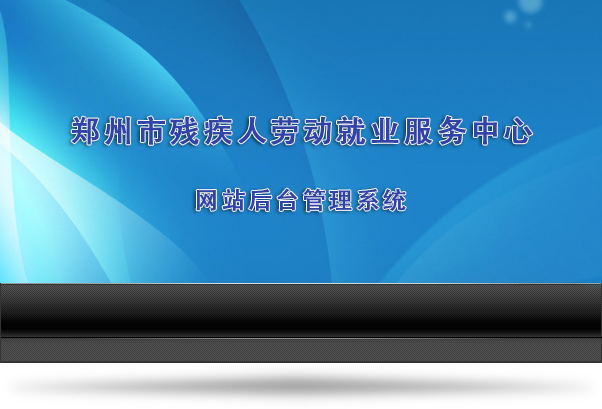
<style>
.page{position:relative;width:602px;height:409px}
.page>*{position:absolute;margin:0}
.t1{font:30px "AdobeHeitiStd-Regular";letter-spacing:0.08em;color:#3043a7;font-weight:bold}
.t2{font:24px "AdobeHeitiStd-Regular";letter-spacing:0.08em;color:#3043a7;font-weight:bold}
</style>
<div class="page">
<p class="t1" style="left:71px;top:115px;width:462px;height:30px">郑州市残疾人劳动就业服务中心</p>
<p class="t2" style="left:196px;top:188px;width:210px;height:24px">网站后台管理系统</p>
</div>
